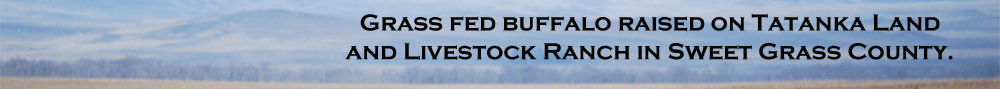
<style>
.page{position:relative;width:1000px;height:89px}
.page>*{position:absolute;margin:0}
.t1{font:24px "CopperplateGothic-Bold";color:#060400}
</style>
<div class="page">
<p class="t1" style="left:345px;top:13px;width:608px;height:47px;text-align:center">Grass fed buffalo raised on Tatanka Land<br>and Livestock Ranch in Sweet Grass County.</p>
</div>
